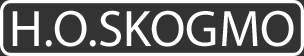
<style>
.page{position:relative;width:304px;height:56px;background:#333333}
.page>*{position:absolute;margin:0}
.t1{font:72px "MyriadArabic-Regular";color:#ffffff}
</style>
<div class="page">
<p class="t1" style="left:12px;top:10px;width:282px;height:37px">H.O.SKOGMO</p>
</div>
